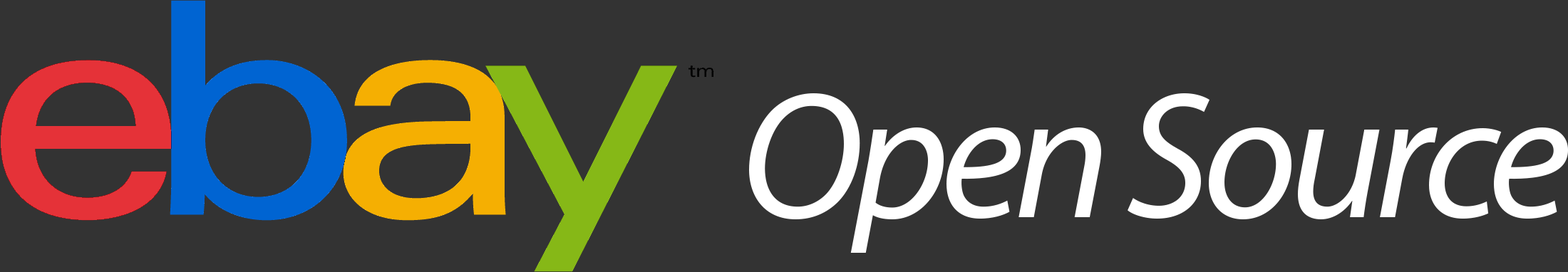
<style>
.page{position:relative;width:1568px;height:272px;background:#333333}
.page>*{position:absolute;margin:0}
.t1{font:181px "MyriadPro-It";letter-spacing:-0.05em;color:#ffffff}
</style>
<div class="page">
<p class="t1" style="left:749px;top:93px;width:819px;height:160px">Open Source</p>
</div>
